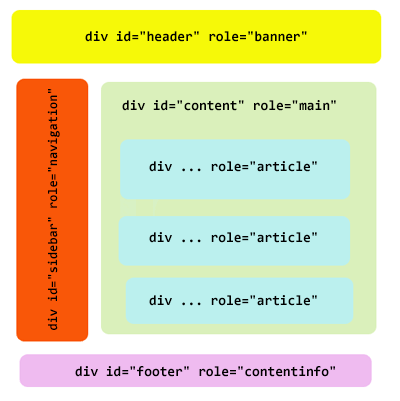
<style>
.page{position:relative;width:400px;height:401px;background:#ffffff}
.page>*{position:absolute;margin:0}
.t1{font:14px "Consolas-Bold";color:#000000}
.t2{font:13px "Consolas-Bold";color:#000000}
</style>
<div class="page">
<p class="t1" style="left:85px;top:31px;width:222px;height:11px">div id="header" role="banner"</p>
<p class="t2" style="left:47px;top:89px;width:13px;height:241px;rotate:-90deg">div id="sidebar" role="navigation"</p>
<p class="t1" style="left:122px;top:100px;width:214px;height:11px">div id="content" role="main"</p>
<p class="t1" style="left:149px;top:161px;width:168px;height:11px">div ... role="article"</p>
<p class="t1" style="left:149px;top:232px;width:168px;height:11px">div ... role="article"</p>
<p class="t1" style="left:149px;top:295px;width:168px;height:11px">div ... role="article"</p>
<p class="t1" style="left:75px;top:366px;width:260px;height:11px">div id="footer" role="contentinfo"</p>
</div>
